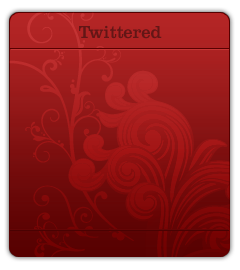
<style>
.page{position:relative;width:240px;height:270px}
.page>*{position:absolute;margin:0}
.t1{font:18px "ClarendonLT";color:#641616}
</style>
<div class="page">
<p class="t1" style="left:79px;top:25px;width:83px;height:14px">Twittered</p>
</div>
